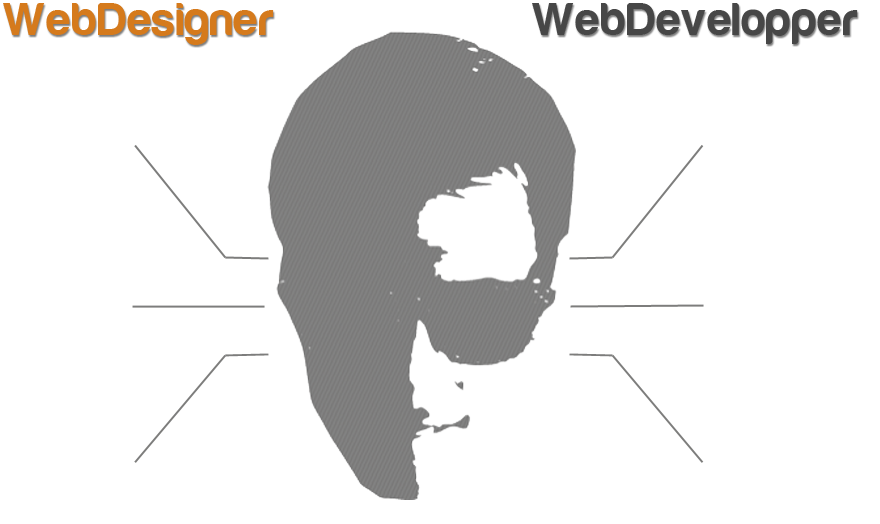
<style>
.page{position:relative;width:880px;height:524px;background:#ffffff}
.page>*{position:absolute;margin:0}
.t1{font:48px "Harabara";letter-spacing:0.025em;color:#d57a1c}
.t2{font:48px "Harabara";letter-spacing:0.025em;color:#474747}
</style>
<div class="page">
<p class="t1" style="left:3px;top:3px;width:271px;height:42px">WebDesigner</p>
<p class="t2" style="left:532px;top:3px;width:326px;height:41px">WebDevelopper</p>
</div>
